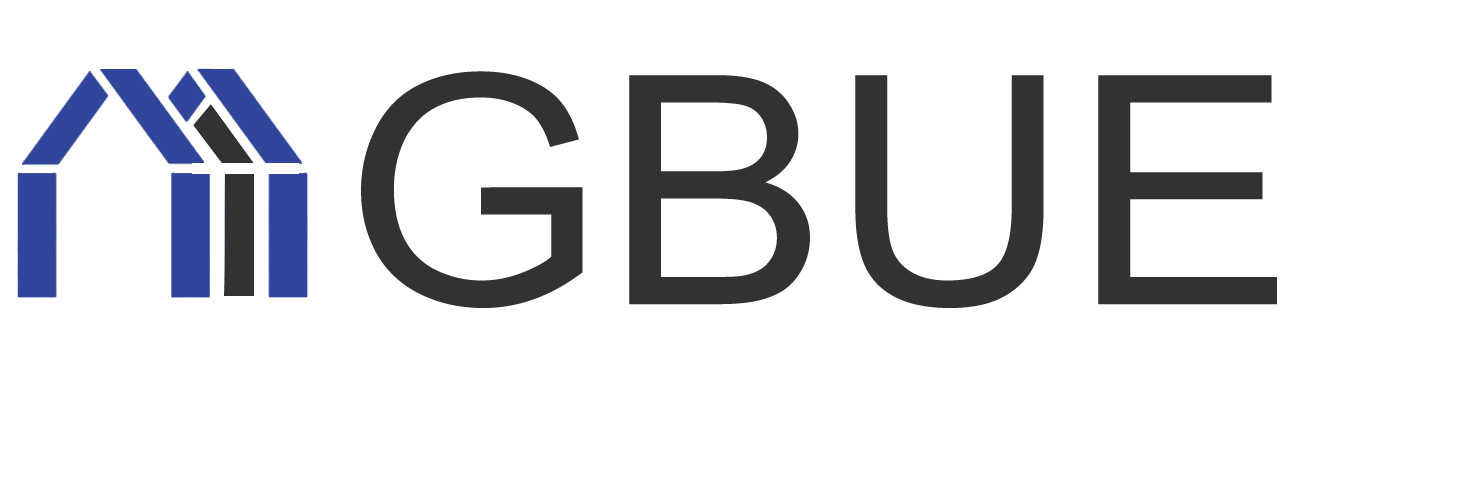
<style>
.page{position:relative;width:1465px;height:493px;background:#ffffff}
.page>*{position:absolute;margin:0}
.t1{font:319.4px "ArialMT";color:#323232;scale:1.05 1}
</style>
<div class="page">
<p class="t1" style="left:361px;top:71px;width:916px;height:237px">GBUE</p>
</div>
